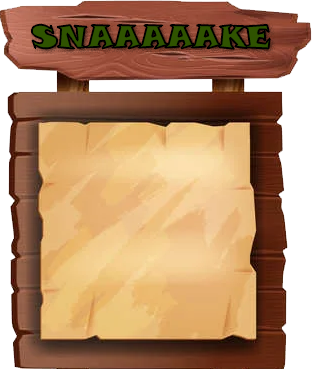
<style>
.page{position:relative;width:312px;height:369px}
.page>*{position:absolute;margin:0}
.t1{font:31px "SnapITC-Regular";color:#2f5300}
</style>
<div class="page">
<p class="t1" style="left:32px;top:24px;width:238px;height:25px">SNAAAAAKE</p>
</div>
